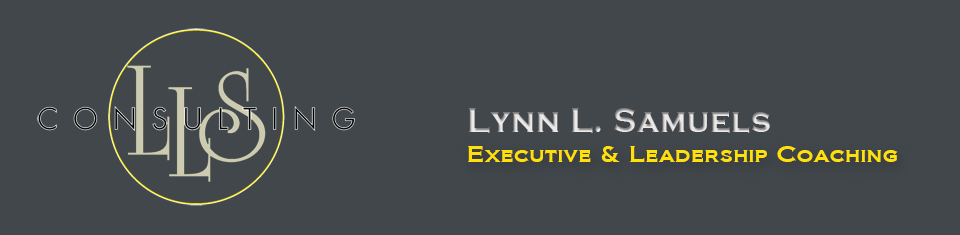
<style>
.page{position:relative;width:960px;height:235px;background:#42474c}
.page>*{position:absolute;margin:0}
.t1{font:36px "CopperplateGothic-Bold";letter-spacing:0.025em;scale:0.9 1}
.t2{font:20.5px "Biondi";color:#ffe109;scale:1.09 1}
</style>
<div class="page">
<p class="t1" style="left:468px;top:108px;width:302px;height:25px">Lynn L. Samuels</p>
<p class="t2" style="left:468px;top:146px;width:430px;height:16px">Executive &amp; Leadership Coaching</p>
</div>
